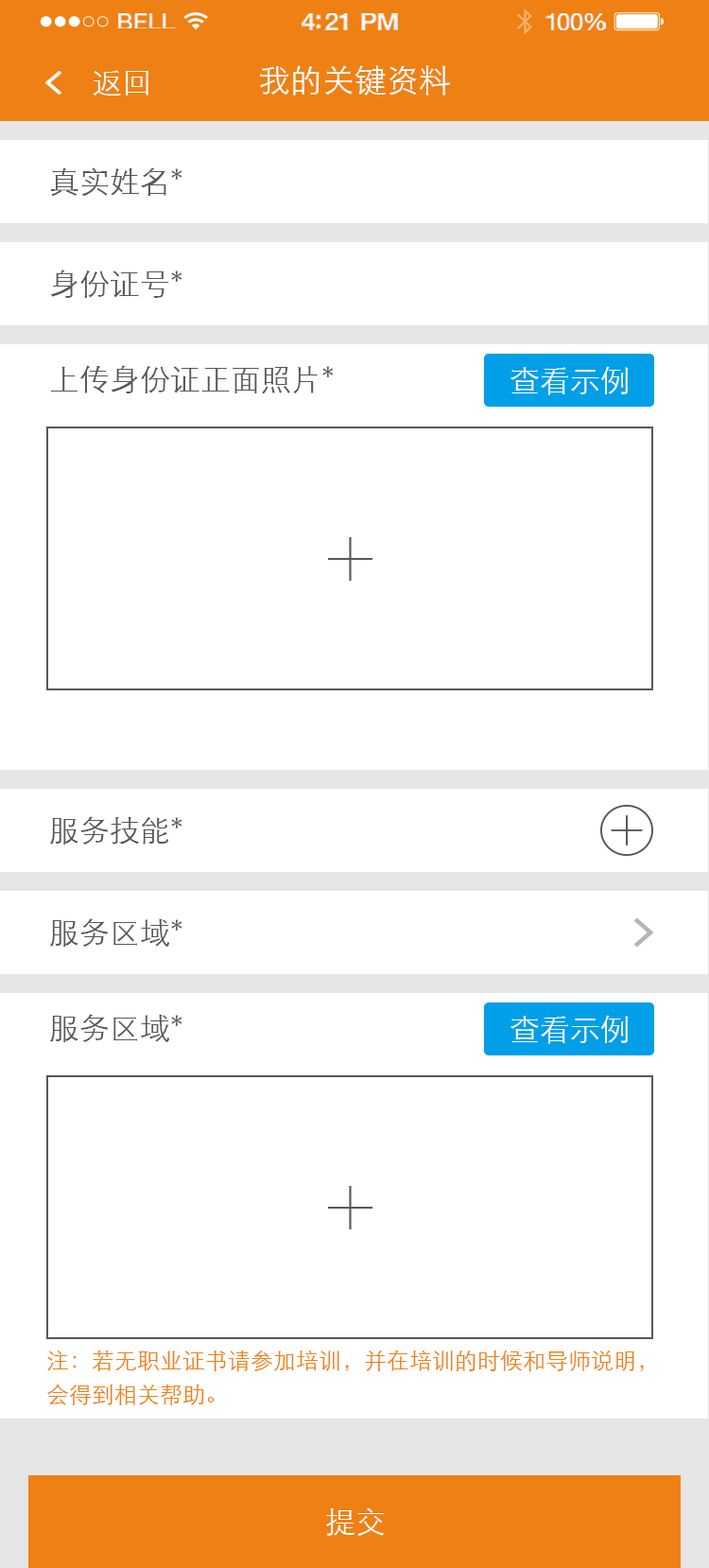
<style>
.page{position:relative;width:709px;height:1568px;background:#ffffff}
.page>*{position:absolute;margin:0}
.t1{font:22px "HelveticaNeue";letter-spacing:0.02em;color:#ffffff;scale:1.06 1}
.t2{font:23.9px "HelveticaNeue-Medium";letter-spacing:-0.02em;color:#ffffff;scale:1.06 1}
.t3{font:23px "HelveticaNeue";letter-spacing:-0.02em;color:#ffffff;scale:1.06 1}
.t4{font:32.2px "STXihei";color:#ffffff}
.t5{font:30.3px "STXihei";color:#ffffff}
.t6{font:30.3px "STXihei";color:#595757}
.t7{font:22.7px/34px "STXihei";color:#ef8013}
</style>
<div class="page">
<p class="t1" style="left:118px;top:13px;width:58px;height:15px">BELL</p>
<p class="t2" style="left:302px;top:13px;width:96px;height:17px">4:21 PM</p>
<p class="t3" style="left:546px;top:13px;width:60px;height:17px">100%</p>
<p class="t4" style="left:260px;top:65px;width:190px;height:31px">我的关键资料</p>
<p class="t5" style="left:93px;top:70px;width:55px;height:26px">返回</p>
<p class="t6" style="left:50px;top:167px;width:133px;height:30px">真实姓名*</p>
<p class="t6" style="left:50px;top:270px;width:133px;height:28px">身份证号*</p>
<p class="t6" style="left:51px;top:365px;width:283px;height:29px">上传身份证正面照片*</p>
<p class="t5" style="left:511px;top:366px;width:118px;height:29px">查看示例</p>
<p class="t6" style="left:50px;top:816px;width:133px;height:29px">服务技能*</p>
<p class="t6" style="left:50px;top:918px;width:133px;height:29px">服务区域*</p>
<p class="t6" style="left:50px;top:1014px;width:133px;height:28px">服务区域*</p>
<p class="t5" style="left:511px;top:1015px;width:118px;height:29px">查看示例</p>
<p class="t7" style="left:47px;top:1350px;width:597px;height:55px">注：若无职业证书请参加培训，并在培训的时候和导师说明，<br>会得到相关帮助。</p>
<p class="t5" style="left:326px;top:1507px;width:58px;height:29px">提交</p>
</div>
